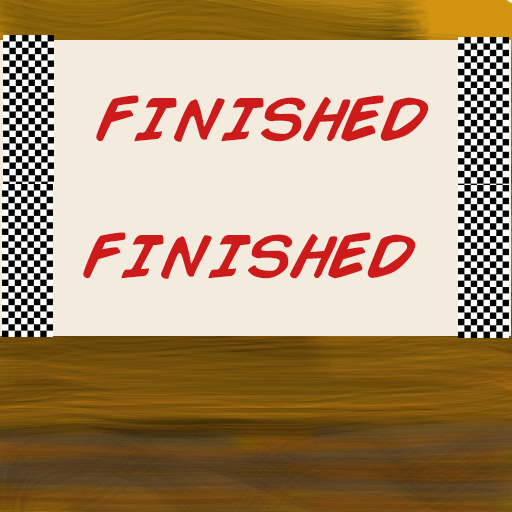
<style>
.page{position:relative;width:512px;height:512px;background:#f2ebde}
.page>*{position:absolute;margin:0}
.t1{font:60px "ComicBook";color:#cd1a1a}
</style>
<div class="page">
<p class="t1" style="left:96px;top:95px;width:333px;height:47px">FINISHED</p>
<p class="t1" style="left:83px;top:232px;width:333px;height:47px">FINISHED</p>
</div>
